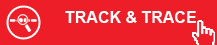
<style>
.page{position:relative;width:217px;height:45px;background:#ed1e28}
.page>*{position:absolute;margin:0}
.t1{font:16px "Arial-BoldMT";color:#ffffff}
</style>
<div class="page">
<p class="t1" style="left:65px;top:11px;width:131px;height:12px">TRACK &amp; TRACE</p>
</div>
